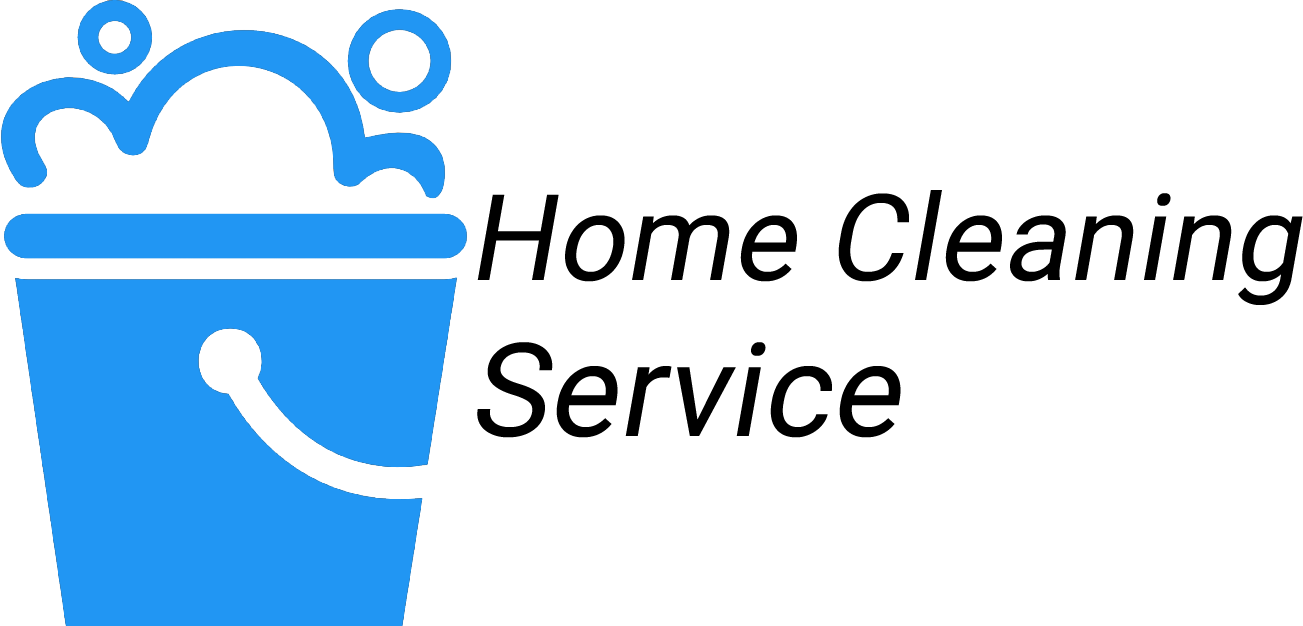
<style>
.page{position:relative;width:1303px;height:626px;background:#ffffff}
.page>*{position:absolute;margin:0}
.t1{font:120px "Roboto-Regular";letter-spacing:0.01em;color:#000000;font-style:italic}
.t2{font:130px "Roboto-Regular";letter-spacing:0.01em;color:#000000;font-style:italic}
</style>
<div class="page">
<p class="t1" style="left:477px;top:190px;width:826px;height:248px">Home Cleaning <br><span class="t2">Service</span></p>
</div>
